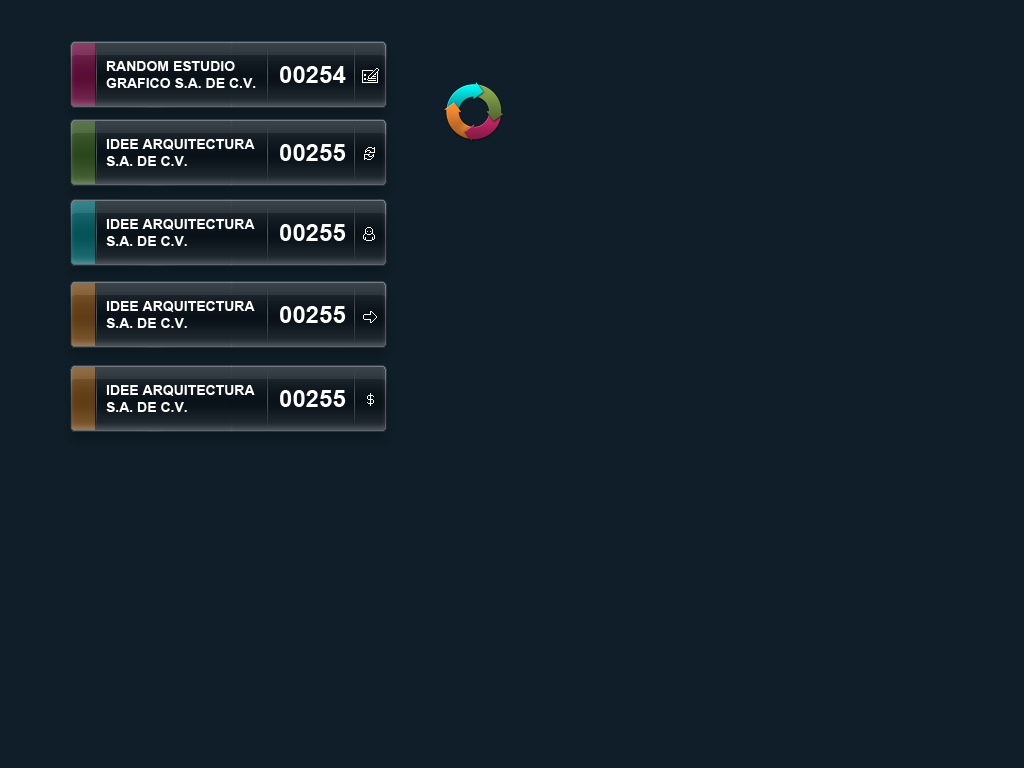
<style>
.page{position:relative;width:1024px;height:768px;background:#0f1e28}
.page>*{position:absolute;margin:0}
.t1{font:14px "Arial-BoldMT";color:#ffffff}
.t2{font:24px "Arial-BoldMT";color:#ffffff}
</style>
<div class="page">
<p class="t1" style="left:106px;top:61px;width:150px;height:27px">RANDOM ESTUDIO<br>GRAFICO S.A. DE C.V.</p>
<p class="t2" style="left:280px;top:66px;width:66px;height:17px">00254</p>
<p class="t1" style="left:106px;top:139px;width:149px;height:27px">IDEE ARQUITECTURA<br>S.A. DE C.V.</p>
<p class="t2" style="left:280px;top:144px;width:66px;height:17px">00255</p>
<p class="t1" style="left:106px;top:219px;width:149px;height:27px">IDEE ARQUITECTURA<br>S.A. DE C.V.</p>
<p class="t2" style="left:280px;top:224px;width:66px;height:17px">00255</p>
<p class="t1" style="left:106px;top:301px;width:149px;height:27px">IDEE ARQUITECTURA<br>S.A. DE C.V.</p>
<p class="t2" style="left:280px;top:306px;width:66px;height:17px">00255</p>
<p class="t1" style="left:106px;top:385px;width:149px;height:27px">IDEE ARQUITECTURA<br>S.A. DE C.V.</p>
<p class="t2" style="left:280px;top:390px;width:66px;height:17px">00255</p>
</div>
